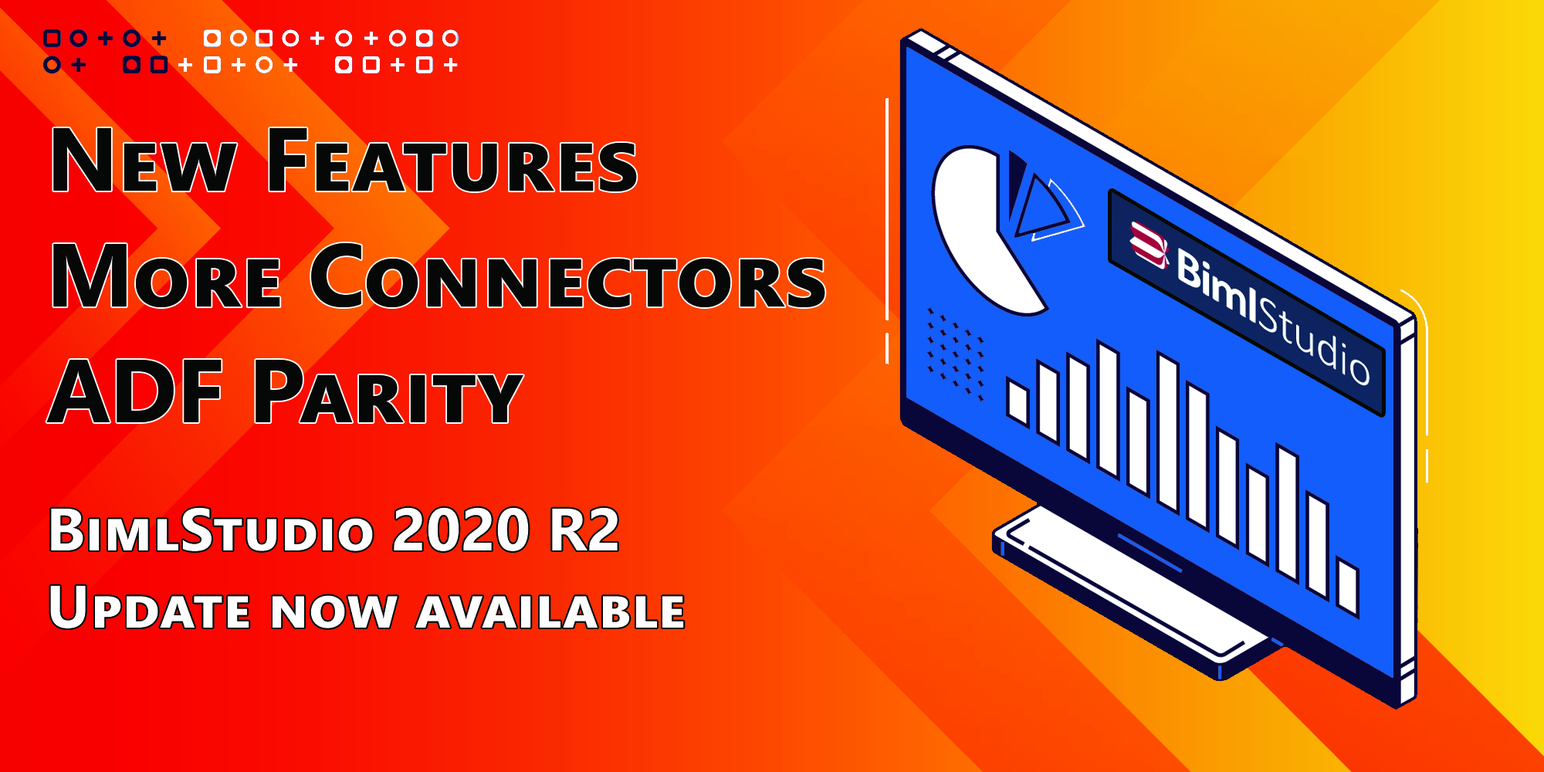
<style>
.page{position:relative;width:1544px;height:772px}
.page>*{position:absolute;margin:0}
.t1{font:89.8px "SegoeUI-Bold";color:#060808;font-variant:small-caps}
.t2{font:59.8px "SegoeUI-Bold";color:#ffffff;font-variant:small-caps}
.t3{font:89.8px "SegoeUI-Bold";color:#cf4200;font-variant:small-caps}
</style>
<div class="page">
<p class="t1" style="left:46px;top:128px;width:779px;height:294px">New Features<br>More Connectors<br>ADF Parity</p>
<p class="t2" style="left:50px;top:507px;width:634px;height:122px"><span class="t3"><br></span>BimlStudio 2020 R2<br>Update now available</p>
</div>
